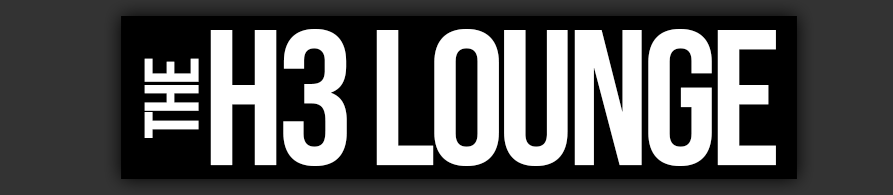
<style>
.page{position:relative;width:893px;height:195px;background:#000000}
.page>*{position:absolute;margin:0}
.t1{font:193px "BebasNeue-Regular";letter-spacing:-0.04em;color:#ffffff}
.t2{font:76.8px "BebasNeue-Regular";letter-spacing:-0.04em;color:#ffffff}
</style>
<div class="page">
<p class="t1" style="left:210px;top:29px;width:566px;height:137px">H3 lounge</p>
<p class="t2" style="left:144px;top:58px;width:55px;height:80px;rotate:-90deg">the</p>
</div>
